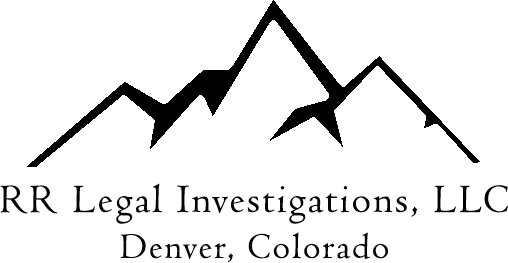
<style>
.page{position:relative;width:508px;height:263px;background:#ffffff}
.page>*{position:absolute;margin:0}
.t1{font:41.7px "Centaur";letter-spacing:0.05em;color:#030303}
.t2{font:37.5px "Centaur";letter-spacing:0.05em;color:#040404}
</style>
<div class="page">
<p class="t1" style="left:0px;top:183px;width:508px;height:41px">RR Legal Investigations, LLC</p>
<p class="t2" style="left:120px;top:232px;width:268px;height:31px">Denver, Colorado</p>
</div>
